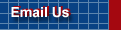
<style>
.page{position:relative;width:121px;height:30px;background:#084284}
.page>*{position:absolute;margin:0}
.t1{font:14px "Arial-BoldMT"}
.t2{font:14px "Arial-BoldMT";color:#ffffff}
</style>
<div class="page">
<p class="t1" style="left:13px;top:6px;width:58px;height:11px">Email Us</p>
<p class="t2" style="left:11px;top:7px;width:58px;height:11px">Email Us</p>
</div>
